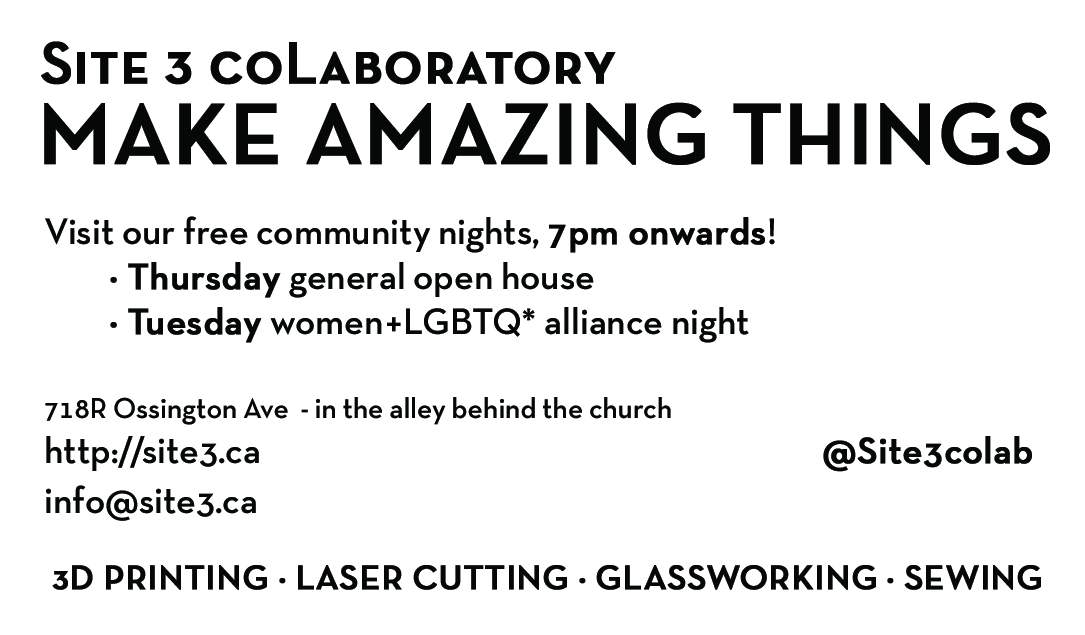
<style>
.page{position:relative;width:1085px;height:635px;background:#ffffff}
.page>*{position:absolute;margin:0}
.t1{font:60.3px "NeutraText-DemiSC";color:#060808;font-weight:bold}
.t2{font:87.5px "NeutraText-DemiSC";color:#060808;text-transform:uppercase;font-weight:bold}
.t3{font:29.2px "NeutraTextTF-Demi";color:#060808}
.t4{font:41.3px "NeutraTextTF-Demi";color:#060808}
.t5{font:37.5px "NeutraTextTF-Demi";color:#060808}
.t6{font:37.5px "NeutraTextTF-Demi";color:#060808;font-weight:bold}
.t7{font:37.5px "NeutraText-DemiSC";color:#ffffff;text-transform:uppercase;font-weight:bold}
.t8{font:35px "NeutraText-DemiSC";color:#060808;text-transform:uppercase;font-weight:bold}
</style>
<div class="page">
<p class="t1" style="left:41px;top:41px;width:575px;height:44px">Site 3 coLaboratory</p>
<p class="t2" style="left:44px;top:102px;width:1006px;height:63px">Make Amazing Things</p>
<p class="t3" style="left:45px;top:216px;width:987px;height:305px"><span class="t4"><br></span><span class="t5">Visit our free community nights, </span><span class="t6">7pm onwards</span><span class="t5">!<br>  </span><span class="t7">· </span><span class="t6">Thursday </span><span class="t5">general open house<br>  </span><span class="t7">· </span><span class="t6">Tuesday </span><span class="t5">women+LGBTQ* alliance night <br><br></span>718R Ossington Ave  - in the alley behind the church<br><span class="t5">http://site3.ca                                                     </span><span class="t6">@Site3colab</span><span class="t5"> <br>info@site3.ca</span></p>
<p class="t8" style="left:52px;top:565px;width:989px;height:25px">3d Printing · Laser Cutting · Glassworking · Sewing</p>
</div>
